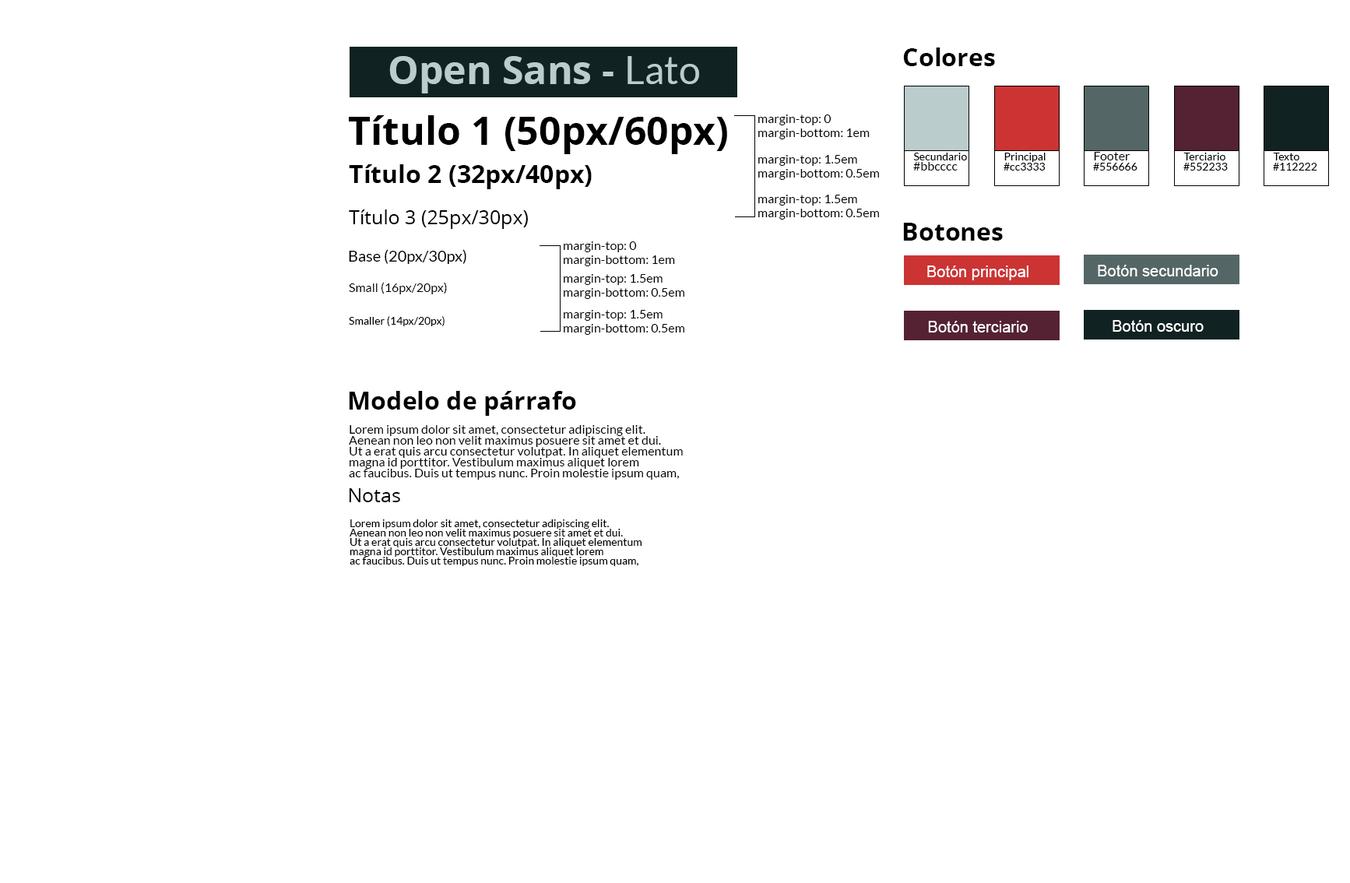
<style>
.page{position:relative;width:1350px;height:883px;background:#ffffff}
.page>*{position:absolute;margin:0}
.t1{font:24.9px "OpenSans-Bold";color:#000000}
.t2{font:38.9px "OpenSans-Bold";color:#bbcccc}
.t3{font:38.9px "Lato-Regular";color:#bbcccc}
.t4{font:38.9px "OpenSans-Bold";color:#000000}
.t5{font:12.5px "Lato-Regular";color:#000000}
.t6{font:10.9px "Lato-Regular";color:#000000}
.t7{font:19.5px "OpenSans-Regular";color:#000000}
.t8{font:15.6px "Lato-Regular";color:#000000}
.t9{font:15.6px "ArialMT";color:#ffffff}
.t10{font:12.5px/10.9px "Lato-Regular";color:#000000}
.t11{font:10.9px/9.3px "Lato-Regular";color:#000000}
</style>
<div class="page">
<p class="t1" style="left:903px;top:48px;width:92px;height:18px">Colores</p>
<p class="t2" style="left:389px;top:56px;width:310px;height:37px">Open Sans - <span class="t3">Lato</span></p>
<p class="t4" style="left:349px;top:115px;width:378px;height:39px">Título 1 (50px/60px)</p>
<p class="t5" style="left:758px;top:114px;width:74px;height:11px">margin-top: 0</p>
<p class="t5" style="left:758px;top:128px;width:112px;height:11px">margin-bottom: 1em</p>
<p class="t5" style="left:758px;top:155px;width:99px;height:11px">margin-top: 1.5em</p>
<p class="t6" style="left:913px;top:153px;width:54px;height:7px">Secundario</p>
<p class="t5" style="left:913px;top:162px;width:45px;height:9px">#bbcccc</p>
<p class="t6" style="left:1005px;top:153px;width:41px;height:9px">Principal</p>
<p class="t5" style="left:1094px;top:152px;width:37px;height:8px">Footer</p>
<p class="t6" style="left:1184px;top:153px;width:42px;height:7px">Terciario</p>
<p class="t6" style="left:1273px;top:153px;width:27px;height:7px">Texto</p>
<p class="t1" style="left:349px;top:164px;width:243px;height:25px">Título 2 (32px/40px)</p>
<p class="t5" style="left:758px;top:169px;width:121px;height:11px">margin-bottom: 0.5em</p>
<p class="t6" style="left:1004px;top:163px;width:42px;height:8px">#cc3333</p>
<p class="t6" style="left:1093px;top:163px;width:45px;height:8px">#556666</p>
<p class="t6" style="left:1184px;top:163px;width:44px;height:8px">#552233</p>
<p class="t6" style="left:1273px;top:163px;width:45px;height:8px">#112222</p>
<p class="t5" style="left:758px;top:195px;width:99px;height:11px">margin-top: 1.5em</p>
<p class="t7" style="left:349px;top:209px;width:179px;height:20px">Título 3 (25px/30px)</p>
<p class="t5" style="left:758px;top:209px;width:121px;height:11px">margin-bottom: 0.5em</p>
<p class="t1" style="left:903px;top:223px;width:100px;height:18px">Botones</p>
<p class="t5" style="left:564px;top:241px;width:73px;height:11px">margin-top: 0</p>
<p class="t8" style="left:349px;top:249px;width:117px;height:15px">Base (20px/30px)</p>
<p class="t5" style="left:564px;top:255px;width:111px;height:11px">margin-bottom: 1em</p>
<p class="t9" style="left:927px;top:266px;width:102px;height:14px">Botón principal</p>
<p class="t9" style="left:1098px;top:265px;width:121px;height:11px">Botón secundario</p>
<p class="t5" style="left:349px;top:282px;width:98px;height:12px">Small (16px/20px)</p>
<p class="t5" style="left:564px;top:274px;width:99px;height:11px">margin-top: 1.5em</p>
<p class="t5" style="left:564px;top:288px;width:121px;height:11px">margin-bottom: 0.5em</p>
<p class="t6" style="left:349px;top:316px;width:96px;height:11px">Smaller (14px/20px)</p>
<p class="t5" style="left:564px;top:310px;width:99px;height:11px">margin-top: 1.5em</p>
<p class="t5" style="left:564px;top:324px;width:121px;height:11px">margin-bottom: 0.5em</p>
<p class="t9" style="left:928px;top:321px;width:100px;height:12px">Botón terciario</p>
<p class="t9" style="left:1113px;top:320px;width:91px;height:12px">Botón oscuro</p>
<p class="t1" style="left:349px;top:391px;width:227px;height:25px">Modelo de párrafo</p>
<p class="t10" style="left:349px;top:425px;width:334px;height:55px">Lorem ipsum dolor sit amet, consectetur adipiscing elit.<br>Aenean non leo non velit maximus posuere sit amet et dui. <br>Ut a erat quis arcu consectetur volutpat. In aliquet elementum <br>magna id porttitor. Vestibulum maximus aliquet lorem <br>ac faucibus. Duis ut tempus nunc. Proin molestie ipsum quam,</p>
<p class="t7" style="left:349px;top:488px;width:51px;height:14px">Notas</p>
<p class="t11" style="left:350px;top:519px;width:292px;height:47px">Lorem ipsum dolor sit amet, consectetur adipiscing elit.<br>Aenean non leo non velit maximus posuere sit amet et dui. <br>Ut a erat quis arcu consectetur volutpat. In aliquet elementum <br>magna id porttitor. Vestibulum maximus aliquet lorem <br>ac faucibus. Duis ut tempus nunc. Proin molestie ipsum quam,</p>
</div>
